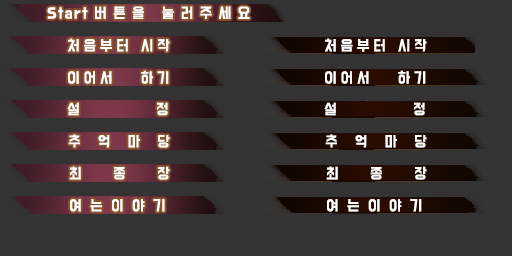
<style>
.page{position:relative;width:512px;height:256px;background:#333333}
.page>*{position:absolute;margin:0}
.t1{font:13px "BMDoHyeon-OTF";letter-spacing:0.5em;color:#ffffff}
.t2{font:13px "BMDoHyeon-OTF";letter-spacing:0.1em;color:#ffffff}
.t3{font:13px "BMDoHyeon-OTF";letter-spacing:0.3em;color:#ffffff}
.t4{font:13px "BMDoHyeon-OTF";letter-spacing:1.05em;color:#ffffff}
.t5{font:13px "BMDoHyeon-OTF";letter-spacing:0.65em;color:#ffffff}
</style>
<div class="page">
<p class="t1" style="left:47px;top:6px;width:203px;height:13px"><span class="t2">Star</span>t버튼을 눌러주세요</p>
<p class="t3" style="left:68px;top:38px;width:102px;height:14px">처음부터 시작</p>
<p class="t3" style="left:325px;top:38px;width:102px;height:14px">처음부터 시작</p>
<p class="t3" style="left:68px;top:70px;width:101px;height:14px">이어서   하기</p>
<p class="t3" style="left:325px;top:70px;width:101px;height:14px">이어서   하기</p>
<p class="t3" style="left:67px;top:102px;width:101px;height:14px">설         정</p>
<p class="t3" style="left:324px;top:102px;width:101px;height:14px">설         정</p>
<p class="t1" style="left:68px;top:134px;width:102px;height:14px">추 억 마 당</p>
<p class="t1" style="left:325px;top:134px;width:102px;height:14px">추 억 마 당</p>
<p class="t4" style="left:69px;top:166px;width:101px;height:14px">최 종 장</p>
<p class="t4" style="left:326px;top:166px;width:101px;height:14px">최 종 장</p>
<p class="t5" style="left:70px;top:199px;width:95px;height:13px">여는이야기</p>
<p class="t5" style="left:327px;top:199px;width:95px;height:13px">여는이야기</p>
</div>
